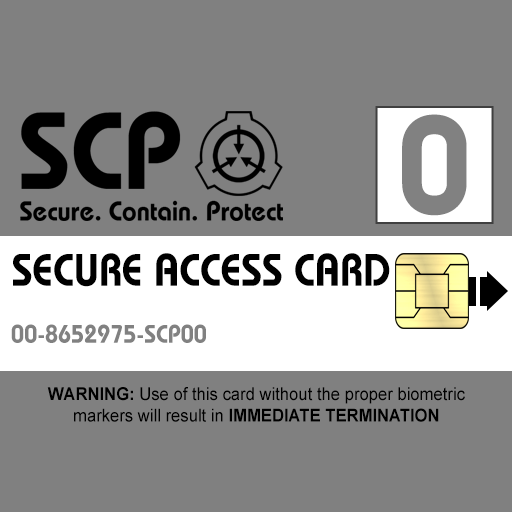
<style>
.page{position:relative;width:512px;height:512px;background:#808080}
.page>*{position:absolute;margin:0}
.t1{font:138.7px "BauhausLT-Demi";color:#818181;scale:0.95 1}
.t2{font:45.5px "BauhausLT-Demi";color:#000000;text-transform:uppercase;scale:0.91 1}
.t3{font:25.5px "BauhausLT-Demi";color:#818181;scale:0.92 1}
.t4{font:17.8px "ArialMT";color:#000000;scale:0.93 1}
.t5{font:17.8px "Arial-BoldMT";color:#000000;scale:0.93 1}
</style>
<div class="page">
<p class="t1" style="left:402px;top:114px;width:65px;height:102px">0</p>
<p class="t2" style="left:13px;top:253px;width:377px;height:34px">Secure Access Card</p>
<p class="t3" style="left:11px;top:324px;width:195px;height:19px">00-8652975-SCP00</p>
<p class="t4" style="left:47px;top:387px;width:418px;height:35px;text-align:center"><span class="t5">WARNING: </span>Use of this card without the proper biometric<br>markers will result in <span class="t5">IMMEDIATE TERMINATION</span></p>
</div>
